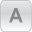
<style>
.page{position:relative;width:32px;height:32px}
.page>*{position:absolute;margin:0}
.t1{font:20px "Arial-BoldMT";color:#878788}
</style>
<div class="page">
<p class="t1" style="left:9px;top:8px;width:14px;height:15px">A</p>
</div>
